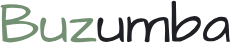
<style>
.page{position:relative;width:230px;height:43px;background:#ffffff}
.page>*{position:absolute;margin:0}
.t1{font:57px "ArchitectsDaughter-Regular";color:#1f2025}
.t2{font:57px "ArchitectsDaughter-Regular";color:#739072}
</style>
<div class="page">
<p class="t1" style="left:0px;top:0px;width:230px;height:43px"><span class="t2">Buz</span>umba</p>
</div>
